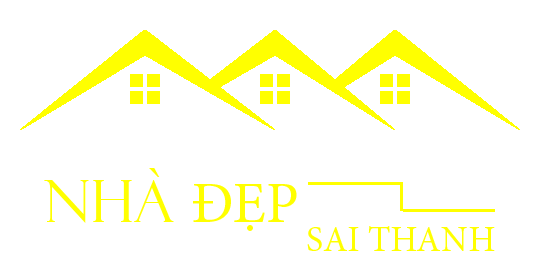
<style>
.page{position:relative;width:540px;height:280px;background:#ffffff}
.page>*{position:absolute;margin:0}
.t1{font:58px "FelixTitlingMT";color:#ffff00}
.t2{font:58px "MinionPro-Regular";color:#ffff00}
.t3{font:36px "MinionPro-Regular";color:#ffff00}
</style>
<div class="page">
<p class="t1" style="left:44px;top:168px;width:253px;height:63px">NHÀ <span class="t2">ĐẸP</span></p>
<p class="t3" style="left:307px;top:226px;width:188px;height:25px">SAI THANH</p>
</div>
